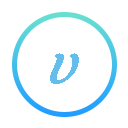
<style>
.page{position:relative;width:128px;height:128px;background:#ffffff}
.page>*{position:absolute;margin:0}
.t1{font:61.3px "Courgette-Regular";color:#65bdeb}
</style>
<div class="page">
<p class="t1" style="left:50px;top:53px;width:29px;height:31px">v</p>
</div>
